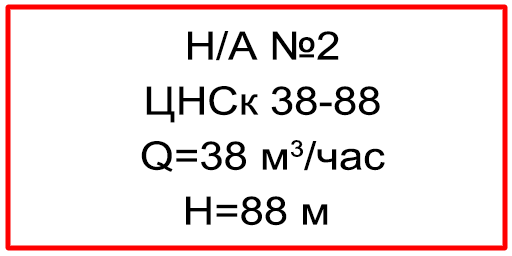
<style>
.page{position:relative;width:512px;height:256px;background:#ffffff}
.page>*{position:absolute;margin:0}
.t1{font:39.1px/55px "ArialMT";color:#000000;scale:1.12 1}
</style>
<div class="page">
<p class="t1" style="left:141px;top:31px;width:244px;height:195px;text-align:center">Н/А №2<br>ЦНСк 38-88<br>Q=38 м3/час<br>Н=88 м</p>
</div>
